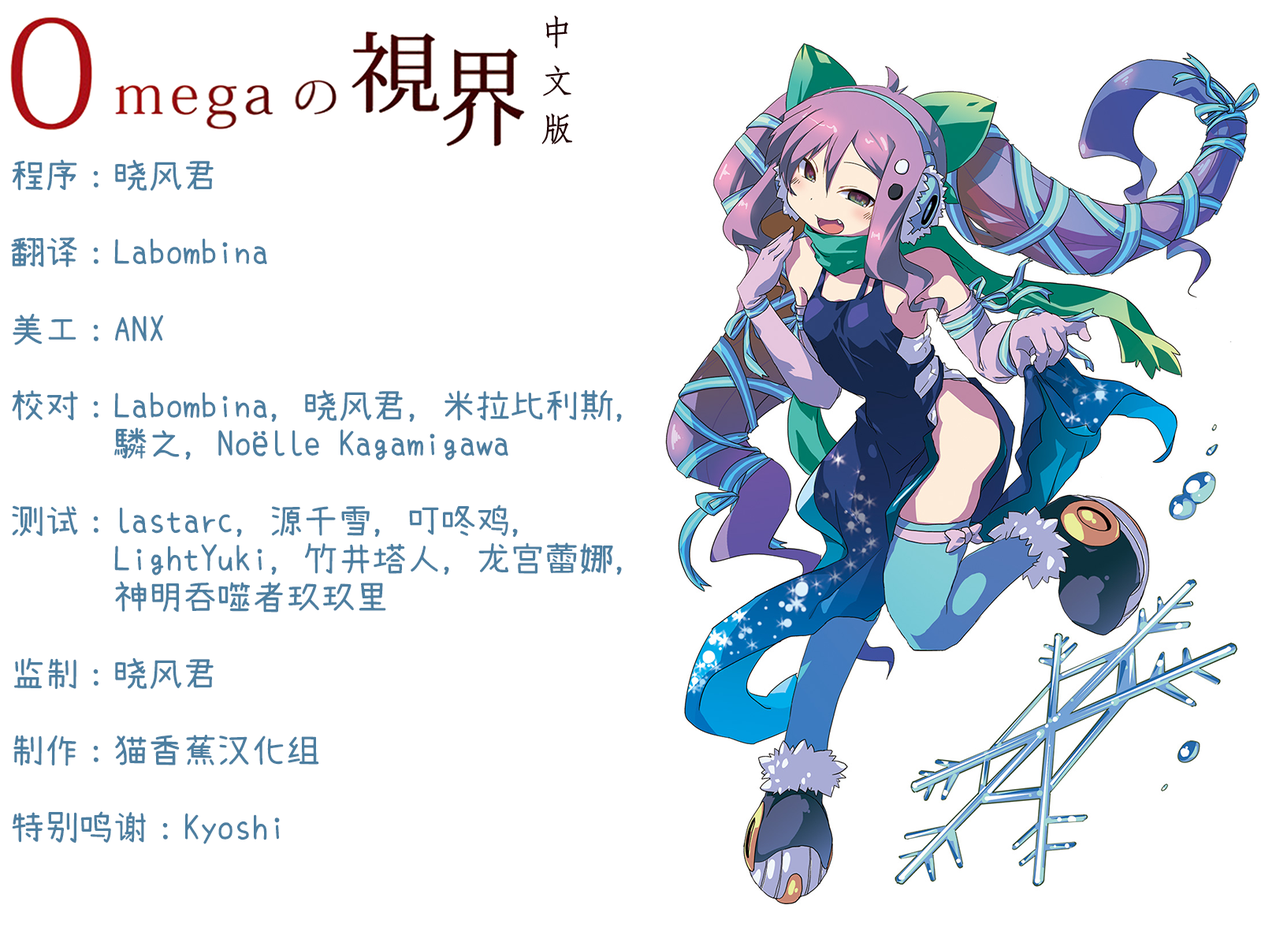
<style>
.page{position:relative;width:1261px;height:946px;background:#ffffff}
.page>*{position:absolute;margin:0}
.t1{font:33.2px/48.5px "HYd4gj";color:#1f0203}
.t2{font:34.5px/38.3px "XiaolaiMono";color:#4c7ea0}
</style>
<div class="page">
<p class="t1" style="left:541px;top:15px;width:31px;height:129px">中<br>文<br>版</p>
<p class="t2" style="left:11px;top:159px;width:611px;height:685px">程序：晓风君<br><br>翻译：Labombina<br><br>美工：ANX<br><br>校对：Labombina，晓风君，米拉比利斯，<br>      驎之，Noëlle Kagamigawa<br><br>测试：lastarc，源千雪，叮咚鸡，<br>      LightYuki，竹井塔人，龙宫蕾娜，<br>      神明吞噬者玖玖里<br><br>监制：晓风君<br><br>制作：猫香蕉汉化组<br><br>特别鸣谢：Kyoshi</p>
</div>
